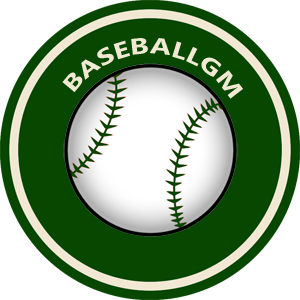
<style>
.page{position:relative;width:300px;height:300px;background:#074700}
.page>*{position:absolute;margin:0}
.t1{font:32.3px/79.3px "Ebrima-Bold";letter-spacing:-0.01em;color:#f1e9d4;font-variant:small-caps;scale:1.31 1}
</style>
<div class="page">
<p class="t1" style="left:62px;top:38px;width:181px;height:61px;text-align:center">baseballgm</p>
</div>
